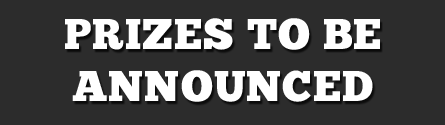
<style>
.page{position:relative;width:445px;height:125px;background:#2c2c2c}
.page>*{position:absolute;margin:0}
.t1{font:43px "ChunkFive-Roman";letter-spacing:0.025em;color:#ffffff}
</style>
<div class="page">
<p class="t1" style="left:65px;top:18px;width:315px;height:84px;text-align:center">PRIZES TO BE<br>ANNOUNCED</p>
</div>
